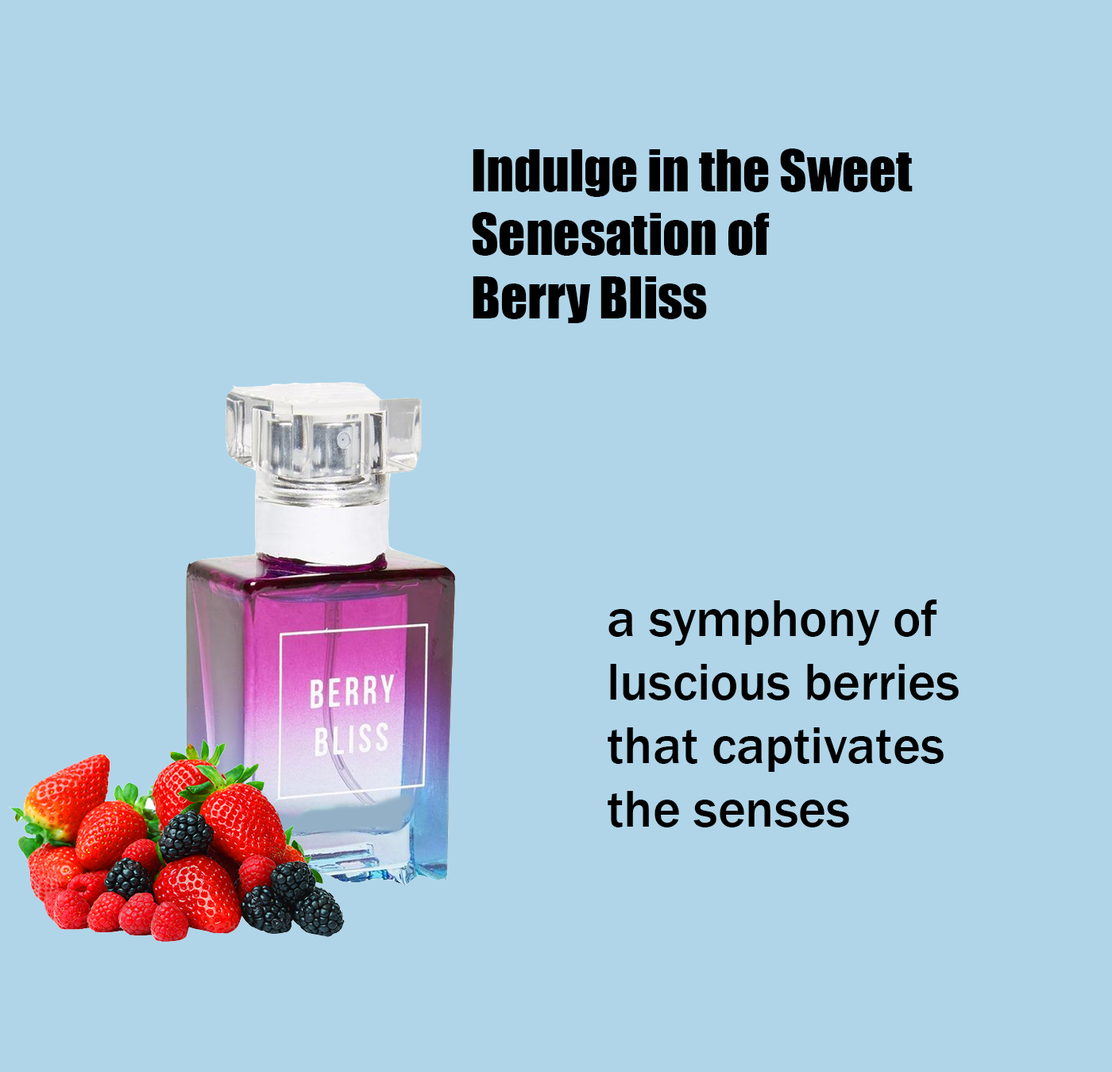
<style>
.page{position:relative;width:1112px;height:1072px;background:#b0d5e8}
.page>*{position:absolute;margin:0}
.t1{font:53px "Impact";color:#000000}
.t2{font:53px "FranklinGothic-Medium";color:#000000}
</style>
<div class="page">
<p class="t1" style="left:472px;top:149px;width:441px;height:174px">Indulge in the Sweet<br>Senesation of <br>Berry Bliss</p>
<p class="t2" style="left:608px;top:600px;width:351px;height:228px">a symphony of <br>luscious berries<br>that captivates<br>the senses</p>
</div>
